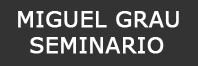
<style>
.page{position:relative;width:198px;height:66px;background:#333333}
.page>*{position:absolute;margin:0}
.t1{font:22px "Verdana";color:#ffffff;font-weight:bold}
</style>
<div class="page">
<p class="t1" style="left:18px;top:11px;width:161px;height:17px">MIGUEL GRAU</p>
<p class="t1" style="left:30px;top:37px;width:134px;height:17px">SEMINARIO</p>
</div>
